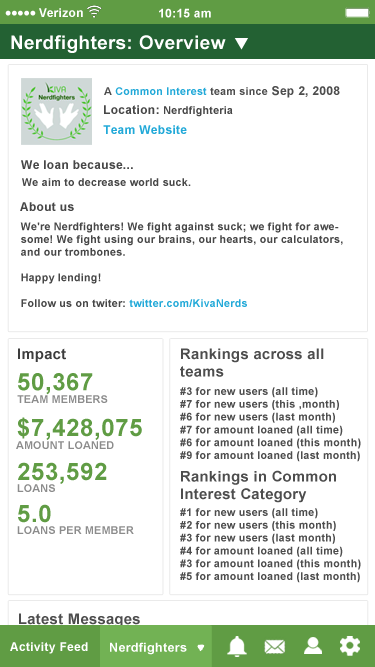
<style>
.page{position:relative;width:375px;height:667px;background:#ffffff}
.page>*{position:absolute;margin:0}
.t1{font:12px "Arial-BoldMT";letter-spacing:0.025em;color:#ffffff}
.t2{font:18.7px "Arial-BoldMT";letter-spacing:0.025em;color:#ffffff}
.t3{font:10.7px "Arial-BoldMT";letter-spacing:0.025em;color:#22a9d8}
.t4{font:10.7px "Arial-BoldMT";letter-spacing:0.025em;color:#4d4d4d}
.t5{font:12px "Arial-BoldMT";letter-spacing:0.025em;color:#4d4d4d}
.t6{font:10.7px "Arial-BoldMT";letter-spacing:0.025em;color:#474747}
.t7{font:12px "Arial-BoldMT";letter-spacing:0.025em;color:#474747}
.t8{font:12px "Arial-BoldMT";letter-spacing:0.025em;color:#22a9d8}
.t9{font:14.7px "Arial-BoldMT";letter-spacing:0.025em;color:#3c3c3c}
.t10{font:14.7px "Arial-BoldMT";letter-spacing:0.025em;color:#4d4d4d}
.t11{font:24px "Arial-BoldMT";letter-spacing:0.025em;color:#609c44}
.t12{font:10.7px "Arial-BoldMT";letter-spacing:0.025em;color:#8c8c8c}
.t13{font:12.5px "Arial-BoldMT";letter-spacing:0.025em;color:#ffffff}
</style>
<div class="page">
<p class="t1" style="left:39px;top:8px;width:44px;height:9px">Verizon</p>
<p class="t1" style="left:159px;top:8px;width:52px;height:10px">10:15 am</p>
<p class="t2" style="left:11px;top:35px;width:215px;height:18px">Nerdfighters: Overview</p>
<p class="t3" style="left:104px;top:86px;width:236px;height:12px"><span class="t4">A </span>Common Interest<span class="t4"> team since</span><span class="t5"> Sep 2, 2008</span></p>
<p class="t6" style="left:104px;top:105px;width:129px;height:12px"><span class="t7">Location: </span>Nerdfighteria</p>
<p class="t8" style="left:103px;top:125px;width:84px;height:9px">Team Website</p>
<p class="t7" style="left:21px;top:160px;width:112px;height:9px">We loan because...</p>
<p class="t6" style="left:22px;top:178px;width:169px;height:8px">We aim to decrease world suck.</p>
<p class="t7" style="left:20px;top:202px;width:54px;height:9px">About us</p>
<p class="t6" style="left:20px;top:222px;width:323px;height:85px">We're Nerdfighters! We fight against suck; we fight for awesome! We fight using our brains, our hearts, our calculators, and our trombones.<br><br>Happy lending!<br><br>Follow us on twiter: <span class="t3">twitter.com/KivaNerds</span></p>
<p class="t9" style="left:18px;top:348px;width:48px;height:14px">Impact</p>
<p class="t10" style="left:180px;top:348px;width:144px;height:29px">Rankings across all <br>teams</p>
<p class="t11" style="left:18px;top:373px;width:75px;height:22px">50,367</p>
<p class="t4" style="left:180px;top:387px;width:181px;height:75px">#3 for new users (all time)<br>#7 for new users (this ,month)<br>#6 for new users (last month)<br>#7 for amount loaned (all time)<br>#6 for amount loaned (this month)<br>#9 for amount loaned (last month)</p>
<p class="t12" style="left:17px;top:395px;width:91px;height:8px">TEAM MEMBERS</p>
<p class="t11" style="left:17px;top:417px;width:125px;height:23px">$7,428,075</p>
<p class="t12" style="left:16px;top:441px;width:98px;height:8px">AMOUNT LOANED</p>
<p class="t11" style="left:18px;top:462px;width:89px;height:22px">253,592</p>
<p class="t10" style="left:181px;top:470px;width:155px;height:33px">Rankings in Common Interest Category</p>
<p class="t12" style="left:17px;top:484px;width:38px;height:8px">LOANS</p>
<p class="t11" style="left:18px;top:504px;width:33px;height:19px">5.0</p>
<p class="t4" style="left:180px;top:508px;width:181px;height:75px">#1 for new users (all time)<br>#2 for new users (this month)<br>#3 for new users (last month)<br>#4 for amount loaned (all time)<br>#3 for amount loaned (this month)<br>#5 for amount loaned (last month)</p>
<p class="t12" style="left:17px;top:526px;width:117px;height:8px">LOANS PER MEMBER</p>
<p class="t10" style="left:19px;top:613px;width:121px;height:15px">Latest Messages</p>
<p class="t1" style="left:10px;top:642px;width:78px;height:12px">Activity Feed</p>
<p class="t13" style="left:110px;top:642px;width:77px;height:13px">Nerdfighters</p>
</div>
